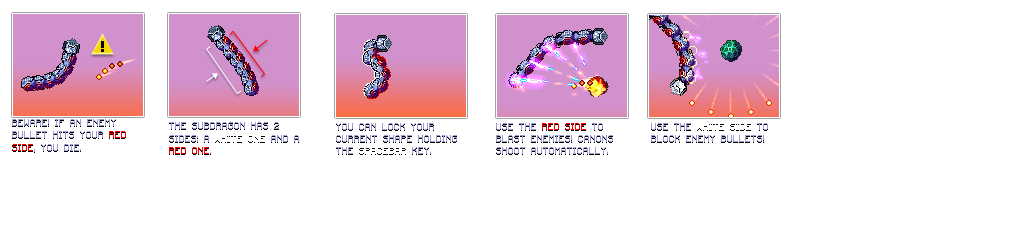
<style>
.page{position:relative;width:1024px;height:240px;background:#ffffff}
.page>*{position:absolute;margin:0}
.t1{font:8px/12.4px "Minecraftia";color:#9d9dd3;text-transform:uppercase}
.t2{font:8px/12.4px "Minecraftia";color:#ff0000;text-transform:uppercase}
.t3{font:8px/12.4px "Minecraftia";color:#ffffff;text-transform:uppercase}
</style>
<div class="page">
<p class="t1" style="left:12px;top:119px;width:114px;height:33px">BEWARE! If an enemy bullet hits your <span class="t2">red side</span>, you die.</p>
<p class="t1" style="left:169px;top:122px;width:130px;height:32px">The SUBDRAGON HAS 2 sides: a <span class="t3">white one</span> and a <span class="t2">red one</span>.</p>
<p class="t1" style="left:496px;top:123px;width:117px;height:31px">Use the <span class="t2">red side </span>to blast enemies! Canons shoot automatically.</p>
</div>
